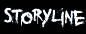
<style>
.page{position:relative;width:86px;height:34px;background:#010102}
.page>*{position:absolute;margin:0}
.t1{font:29.2px "YouMurdererBB";color:#ffffff}
</style>
<div class="page">
<p class="t1" style="left:3px;top:7px;width:83px;height:21px">StoryLine</p>
</div>
